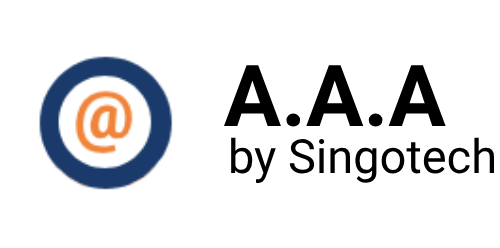
<style>
.page{position:relative;width:500px;height:248px;background:#ffffff}
.page>*{position:absolute;margin:0}
.t1{font:85.5px "Roboto-Bold";color:#000000}
.t2{font:47px "Roboto-Regular";color:#000000}
</style>
<div class="page">
<p class="t1" style="left:224px;top:65px;width:222px;height:62px">A.A.A</p>
<p class="t2" style="left:231px;top:137px;width:263px;height:46px">by Singotech</p>
</div>
